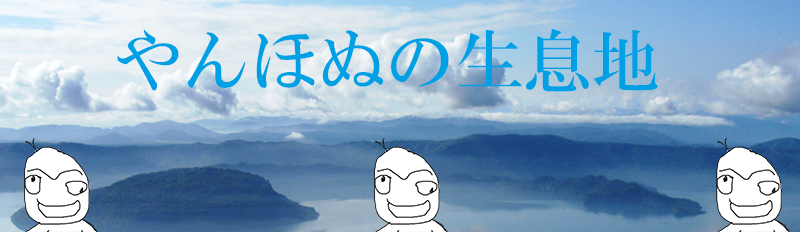
<style>
.page{position:relative;width:800px;height:232px}
.page>*{position:absolute;margin:0}
.t1{font:68.1px "HGMinchoB";color:#00a0e5}
</style>
<div class="page">
<p class="t1" style="left:117px;top:29px;width:541px;height:63px">やんほぬの生息地</p>
</div>
